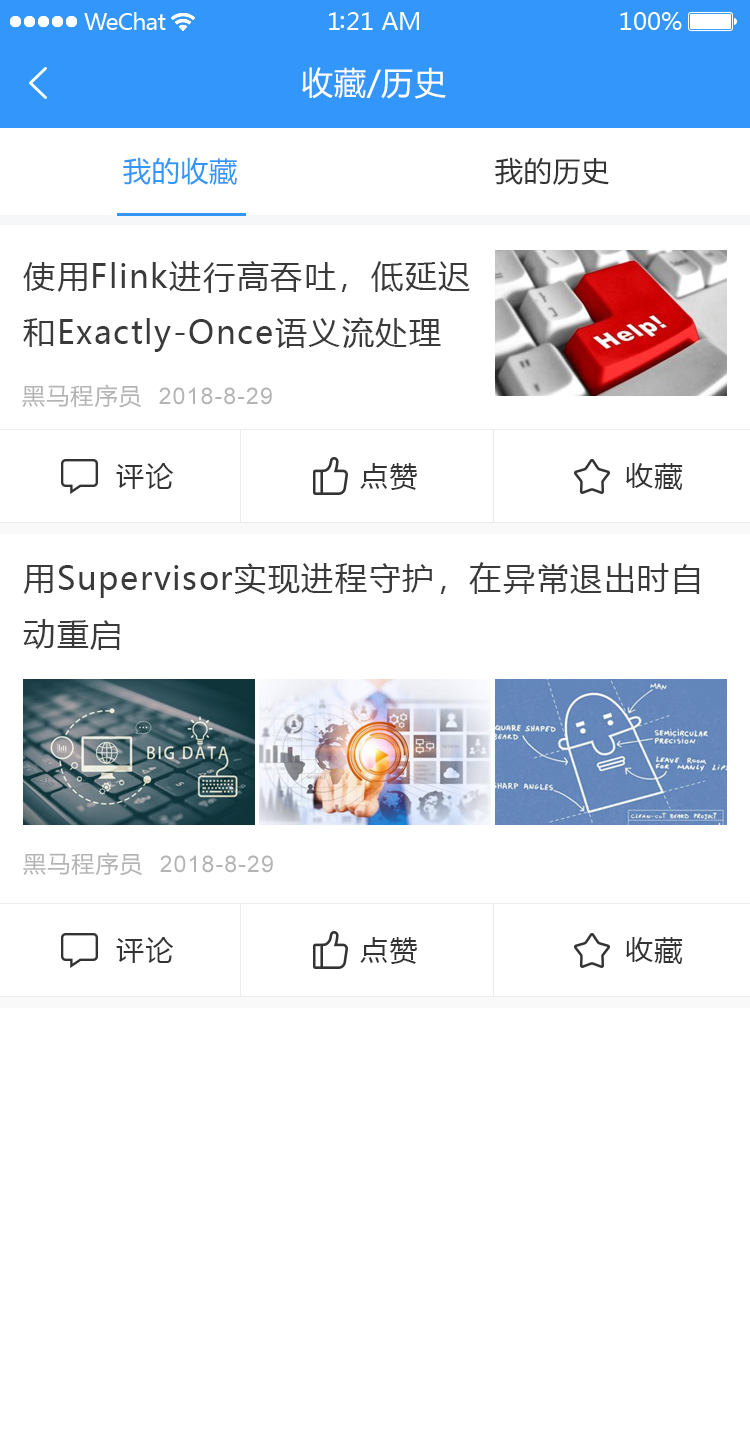
<style>
.page{position:relative;width:750px;height:1448px;background:#ffffff}
.page>*{position:absolute;margin:0}
.t1{font:32px "MicrosoftYaHei";letter-spacing:0.025em;color:#ffffff}
.t2{font:28px "MicrosoftYaHei";letter-spacing:0.025em;color:#3296fa}
.t3{font:28px "MicrosoftYaHei";letter-spacing:0.025em;color:#333333}
.t4{font:32px "MicrosoftYaHei";letter-spacing:0.05em;color:#3a3a3a}
.t5{font:23px "ArialMT";letter-spacing:0.05em;color:#b4b4b4}
.t6{font:23px "MicrosoftYaHei";letter-spacing:0.05em;color:#b4b4b4}
.t7{font:28px "MicrosoftYaHei";letter-spacing:0.05em;color:#333333}
</style>
<div class="page">
<p class="t1" style="left:302px;top:67px;width:144px;height:32px">收藏/历史</p>
<p class="t2" style="left:123px;top:157px;width:114px;height:28px">我的收藏</p>
<p class="t3" style="left:495px;top:157px;width:114px;height:28px">我的历史</p>
<p class="t4" style="left:23px;top:261px;width:447px;height:91px">使用Flink进行高吞吐，低延迟<br>和Exactly-Once语义流处理</p>
<p class="t5" style="left:22px;top:384px;width:250px;height:24px"><span class="t6">黑马程序员  </span>2018-8-29</p>
<p class="t7" style="left:116px;top:463px;width:58px;height:26px">评论</p>
<p class="t7" style="left:360px;top:463px;width:58px;height:27px">点赞</p>
<p class="t7" style="left:626px;top:463px;width:57px;height:27px">收藏</p>
<p class="t4" style="left:23px;top:562px;width:677px;height:88px">用Supervisor实现进程守护，在异常退出时自<br>动重启</p>
<p class="t5" style="left:23px;top:852px;width:250px;height:24px"><span class="t6">黑马程序员  </span>2018-8-29</p>
<p class="t7" style="left:116px;top:937px;width:58px;height:26px">评论</p>
<p class="t7" style="left:360px;top:937px;width:58px;height:27px">点赞</p>
<p class="t7" style="left:626px;top:937px;width:57px;height:27px">收藏</p>
</div>
